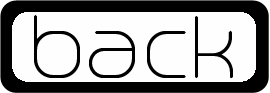
<style>
.page{position:relative;width:270px;height:93px;background:#fefefe}
.page>*{position:absolute;margin:0}
.t1{font:111.1px "Trench-Thin";color:#000000}
</style>
<div class="page">
<p class="t1" style="left:34px;top:15px;width:199px;height:64px">back</p>
</div>
